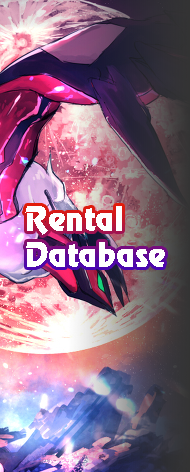
<style>
.page{position:relative;width:190px;height:472px}
.page>*{position:absolute;margin:0}
.t1{font:30px "Revue";color:#ffffff}
</style>
<div class="page">
<p class="t1" style="left:25px;top:206px;width:140px;height:61px;text-align:right">Rental<br>Database</p>
</div>
